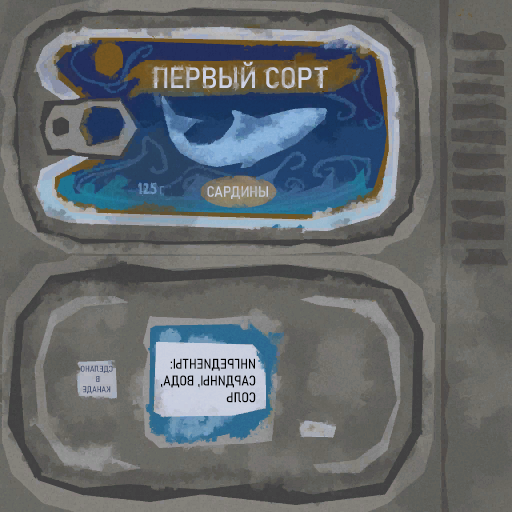
<style>
.page{position:relative;width:512px;height:512px}
.page>*{position:absolute;margin:0}
.t1{font:11.3px "Bahnschrift-SemiCondensed";color:#628ab2;text-transform:uppercase}
.t2{font:8.6px "Bahnschrift-SemiCondensed";color:#424d6b;text-transform:uppercase}
.t3{font:14px "Bahnschrift-SemiCondensed";color:#000000;text-transform:uppercase}
</style>
<div class="page">
<p class="t1" style="left:160px;top:186px;width:4px;height:9px">г</p>
<p class="t2" style="left:80px;top:365px;width:33px;height:29px;text-align:center;rotate:180deg">сделано<br>в <br>канаде</p>
<p class="t3" style="left:161px;top:358px;width:95px;height:45px;rotate:180deg">ингредиенты: <br>сардины, вода,<br>Соль</p>
</div>
